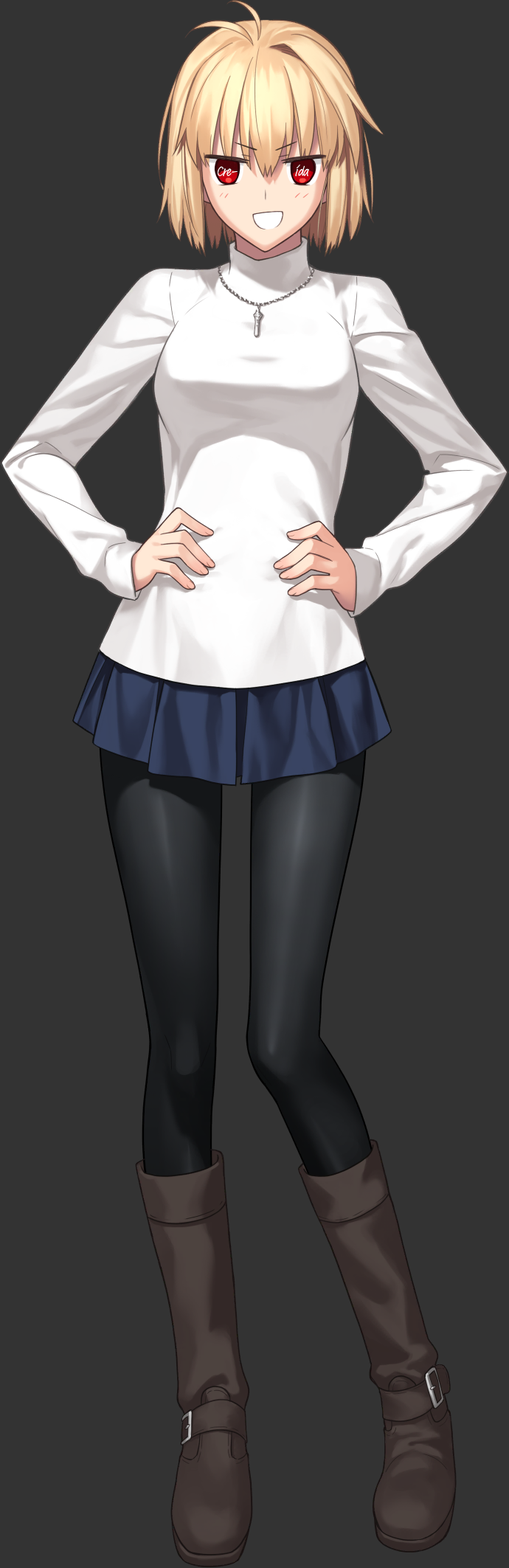
<style>
.page{position:relative;width:509px;height:1568px;background:#333333}
.page>*{position:absolute;margin:0}
.t1{font:13.3px "AdobeHandwriting-Frank";letter-spacing:-0.025em;color:#ffffff}
</style>
<div class="page">
<p class="t1" style="left:218px;top:166px;width:20px;height:10px">Cre-</p>
<p class="t1" style="left:295px;top:165px;width:14px;height:11px">ída</p>
</div>
